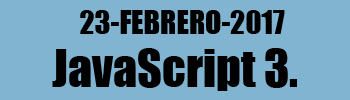
<style>
.page{position:relative;width:350px;height:100px;background:#81b4d1}
.page>*{position:absolute;margin:0}
.t1{font:30px "Impact";color:#000000}
.t2{font:48px "Impact";color:#000000}
</style>
<div class="page">
<p class="t1" style="left:80px;top:10px;width:205px;height:24px">23-FEBRERO-2017</p>
<p class="t2" style="left:52px;top:48px;width:245px;height:43px">JavaScript 3.</p>
</div>
